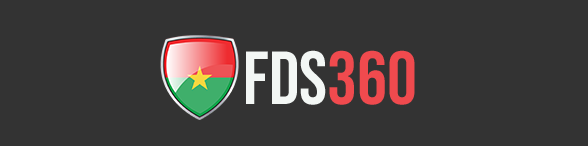
<style>
.page{position:relative;width:588px;height:146px;background:#333333}
.page>*{position:absolute;margin:0}
.t1{font:75px "BebasNeue-Regular";color:#f3f7f5}
.t2{font:75px "BebasNeue-Regular";color:#f04a4e}
</style>
<div class="page">
<p class="t1" style="left:246px;top:50px;width:169px;height:55px">FDS<span class="t2">360</span></p>
</div>
